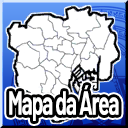
<style>
.page{position:relative;width:128px;height:128px;background:#ffffff}
.page>*{position:absolute;margin:0}
.t1{font:33.3px "Barlow-Bold";letter-spacing:-0.05em;color:#ffffff;scale:0.62 1}
</style>
<div class="page">
<p class="t1" style="left:9px;top:85px;width:110px;height:36px">Mapa da Área</p>
</div>
